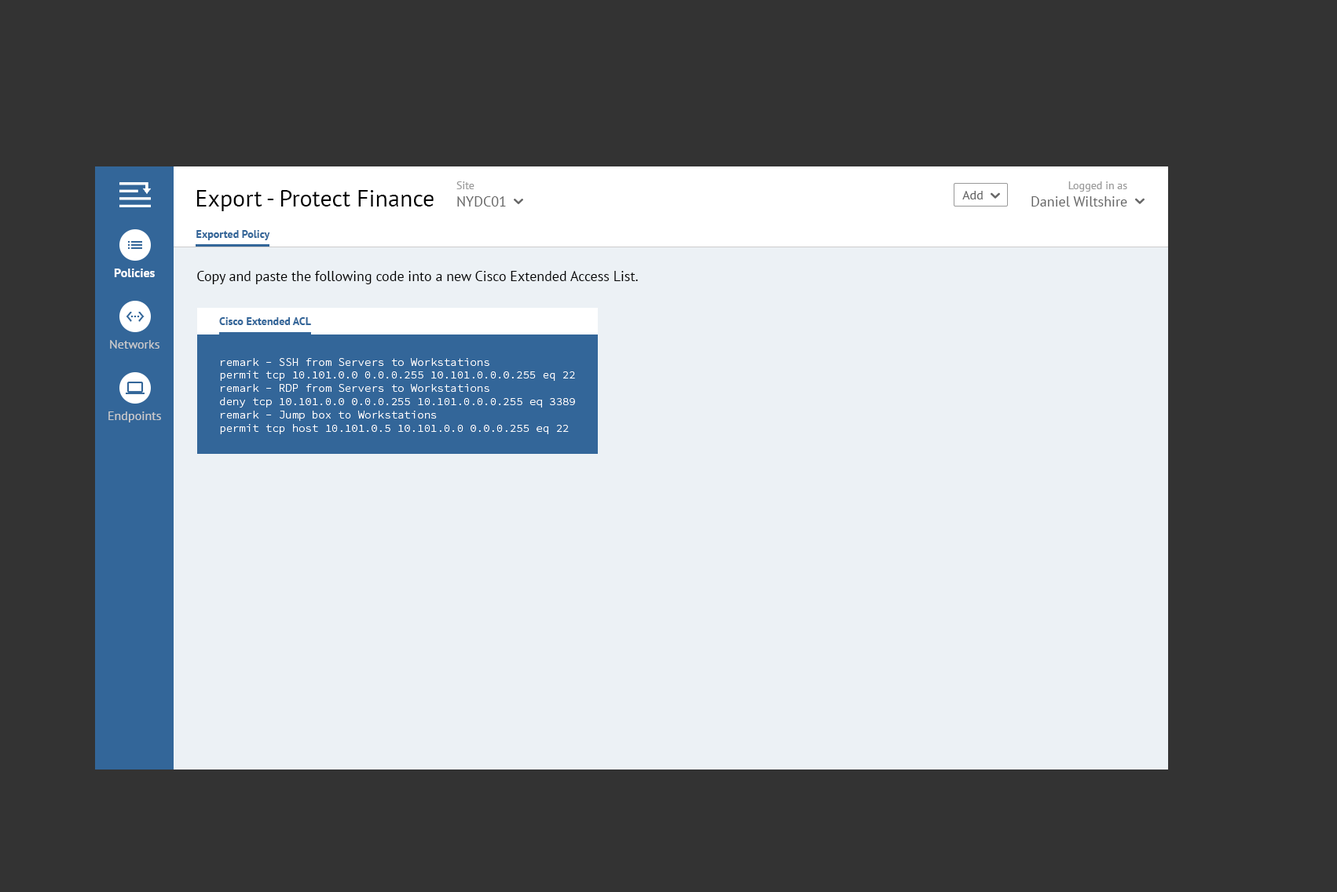
<style>
.page{position:relative;width:1337px;height:892px;background:#333333}
.page>*{position:absolute;margin:0}
.t1{font:14.1px "PTSans-Regular";color:#666666}
.t2{font:11px "PTSans-Regular";color:#999999}
.t3{font:14.3px "PTSans-Regular";color:#666666}
.t4{font:11.1px "PTSans-Regular";color:#999999}
.t5{font:23.6px "PTSans-Regular";color:#000000}
.t6{font:12.6px "PTSans-Regular";color:#666666}
.t7{font:10.9px "PTSans-Bold";color:#336699}
.t8{font:12.6px "PTSans-Bold";color:#ffffff}
.t9{font:14.1px "PTSans-Regular";color:#000000}
.t10{font:11px "PTSans-Bold";color:#336699}
.t11{font:12.6px "PTSans-Regular";color:#cccccc}
.t12{font:11px "SourceCodePro-Light";color:#ffffff}
</style>
<div class="page">
<p class="t1" style="left:456px;top:181px;width:50px;height:26px"><span class="t2">Site<br></span>NYDC01</p>
<p class="t3" style="left:1031px;top:181px;width:96px;height:26px;text-align:right"><span class="t4">Logged in as<br></span>Daniel Wiltshire</p>
<p class="t5" style="left:197px;top:190px;width:236px;height:21px">Export - Protect Finance</p>
<p class="t6" style="left:962px;top:191px;width:20px;height:8px">Add</p>
<p class="t7" style="left:196px;top:230px;width:74px;height:10px">Exported Policy</p>
<p class="t8" style="left:114px;top:269px;width:41px;height:8px">Policies</p>
<p class="t9" style="left:197px;top:271px;width:441px;height:13px">Copy and paste the following code into a new Cisco Extended Access List.</p>
<p class="t10" style="left:219px;top:317px;width:92px;height:8px">Cisco Extended ACL</p>
<p class="t11" style="left:110px;top:340px;width:49px;height:9px">Networks</p>
<p class="t12" style="left:220px;top:358px;width:355px;height:76px">remark - SSH from Servers to Workstations<br>permit tcp 10.101.0.0 0.0.0.255 10.101.0.0.0.255 eq 22<br>remark - RDP from Servers to Workstations<br>deny tcp 10.101.0.0 0.0.0.255 10.101.0.0.0.255 eq 3389<br>remark - Jump box to Workstations<br>permit tcp host 10.101.0.5 10.101.0.0 0.0.0.255 eq 22</p>
<p class="t11" style="left:108px;top:412px;width:53px;height:11px">Endpoints</p>
</div>
